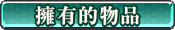
<style>
.page{position:relative;width:175px;height:30px}
.page>*{position:absolute;margin:0}
.t1{font:20px "RyuminPr6N-ExBold";letter-spacing:0.075em;color:#fff6f3}
</style>
<div class="page">
<p class="t1" style="left:35px;top:6px;width:104px;height:20px">擁有的物品</p>
</div>
